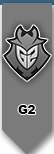
<style>
.page{position:relative;width:54px;height:154px;background:#7b7b7b}
.page>*{position:absolute;margin:0}
.t1{font:11.7px "Arial-Black";letter-spacing:-0.01em;color:#000000}
</style>
<div class="page">
<p class="t1" style="left:18px;top:105px;width:17px;height:9px">G2</p>
</div>
